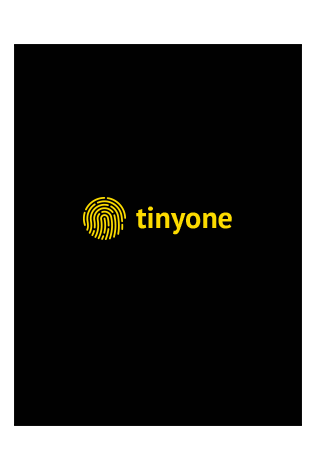
<style>
.page{position:relative;width:316px;height:470px;background:#010101}
.page>*{position:absolute;margin:0}
.t1{font:30px "PTSans-Bold";color:#fcdb00}
</style>
<div class="page">
<p class="t1" style="left:136px;top:206px;width:96px;height:29px">tinyone</p>
</div>
